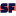
<style>
.page{position:relative;width:16px;height:16px;background:#ffffff}
.page>*{position:absolute;margin:0}
.t1{font:12.5px "BungeeInline-Regular";letter-spacing:-0.05em;color:#0d0f39;font-weight:bold}
</style>
<div class="page">
<p class="t1" style="left:0px;top:3px;width:16px;height:10px">SF</p>
</div>
